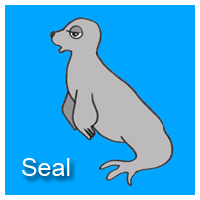
<style>
.page{position:relative;width:200px;height:200px;background:#00a5ff}
.page>*{position:absolute;margin:0}
.t1{font:25px "ArialMT";color:#ffffff}
</style>
<div class="page">
<p class="t1" style="left:22px;top:158px;width:48px;height:18px">Seal</p>
</div>
